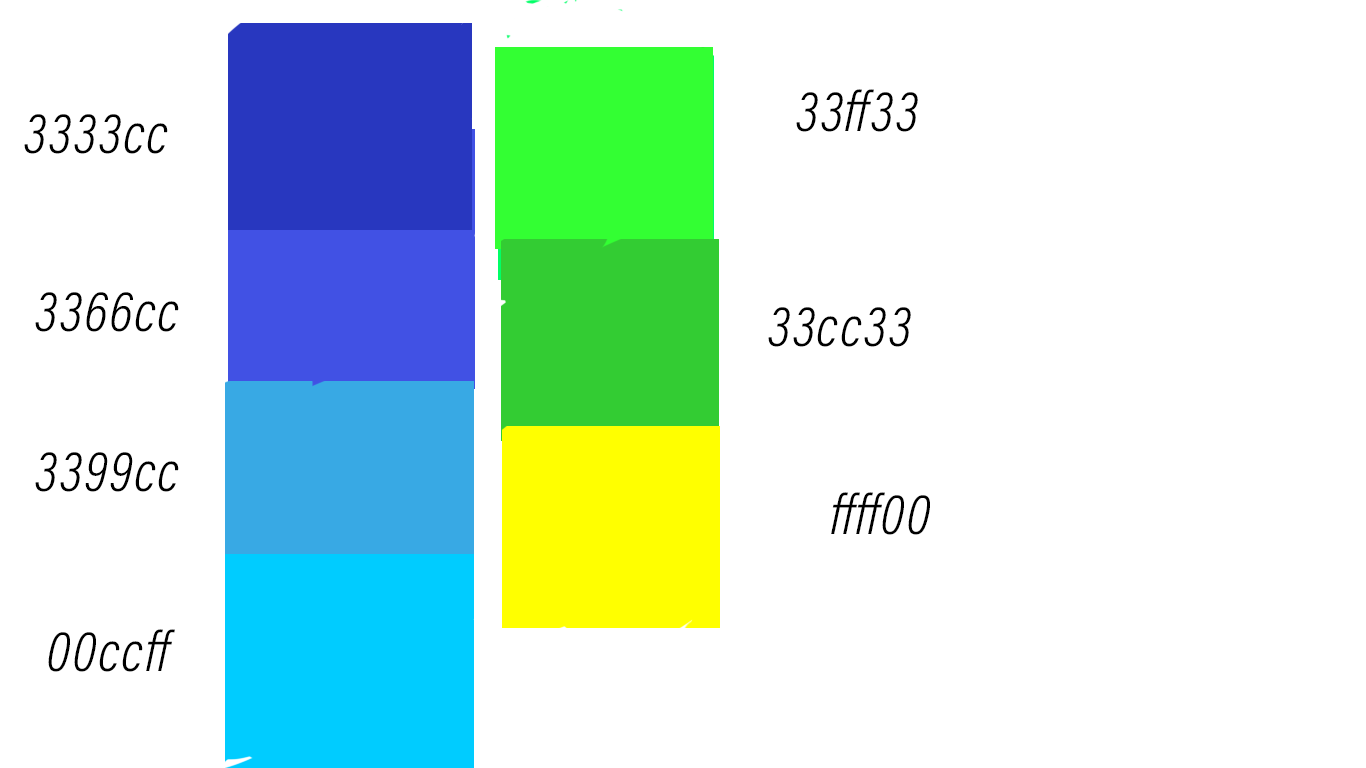
<style>
.page{position:relative;width:1366px;height:768px;background:#ffffff}
.page>*{position:absolute;margin:0}
.t1{font:58px "AcuminConcept-CondensedLightItalic";letter-spacing:0.025em;color:#000000;font-weight:bold}
</style>
<div class="page">
<p class="t1" style="left:796px;top:89px;width:122px;height:43px">33ff33</p>
<p class="t1" style="left:24px;top:114px;width:144px;height:40px">3333cc</p>
<p class="t1" style="left:35px;top:292px;width:144px;height:40px">3366cc</p>
<p class="t1" style="left:768px;top:307px;width:143px;height:40px">33cc33</p>
<p class="t1" style="left:35px;top:452px;width:144px;height:40px">3399cc</p>
<p class="t1" style="left:831px;top:492px;width:99px;height:43px">ffff00</p>
<p class="t1" style="left:48px;top:629px;width:127px;height:43px">00ccff</p>
</div>
